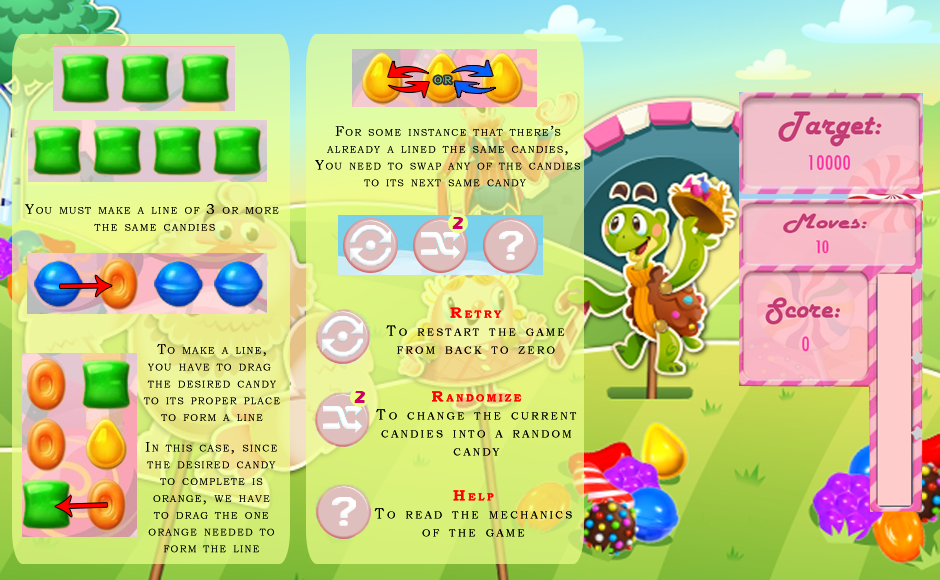
<style>
.page{position:relative;width:940px;height:580px}
.page>*{position:absolute;margin:0}
.t1{font:10px "BookmanOldStyle";letter-spacing:0.2em;color:#86e994;text-transform:uppercase}
.t2{font:14px "BookmanOldStyle";letter-spacing:0.1em;color:#000000;font-variant:small-caps}
.t3{font:15px "BookmanOldStyle";letter-spacing:0.2em;color:#000000;font-variant:small-caps}
.t4{font:15px "BookmanOldStyle-Bold";letter-spacing:0.2em;color:#ff0000;font-variant:small-caps}
</style>
<div class="page">
<p class="t1" style="left:434px;top:76px;width:18px;height:8px">or</p>
<p class="t2" style="left:315px;top:125px;width:265px;height:62px;text-align:center">For some instance that there’s<br>already a lined the same candies,<br>You need to swap any of the candies<br>to its next same candy</p>
<p class="t2" style="left:315px;top:125px;width:265px;height:62px;text-align:center">For some instance that there’s<br>already a lined the same candies,<br>You need to swap any of the candies<br>to its next same candy</p>
<p class="t2" style="left:25px;top:204px;width:254px;height:27px;text-align:center">You must make a line of 3 or more <br>the same candies</p>
<p class="t2" style="left:25px;top:204px;width:254px;height:27px;text-align:center">You must make a line of 3 or more <br>the same candies</p>
<p class="t3" style="left:386px;top:307px;width:179px;height:47px;text-align:center"><span class="t4">Retry<br></span>To restart the game<br>from back to zero</p>
<p class="t3" style="left:386px;top:307px;width:179px;height:47px;text-align:center"><span class="t4">Retry<br></span>To restart the game<br>from back to zero</p>
<p class="t2" style="left:143px;top:344px;width:137px;height:77px;text-align:center">To make a line,<br>you have to drag <br>the desired candy<br>to its proper place<br>to form a line</p>
<p class="t2" style="left:143px;top:344px;width:137px;height:77px;text-align:center">To make a line,<br>you have to drag <br>the desired candy<br>to its proper place<br>to form a line</p>
<p class="t3" style="left:376px;top:391px;width:201px;height:65px;text-align:center"><span class="t4">Randomize<br></span>To change the current<br>candies into a random<br>candy</p>
<p class="t3" style="left:376px;top:391px;width:201px;height:65px;text-align:center"><span class="t4">Randomize<br></span>To change the current<br>candies into a random<br>candy</p>
<p class="t2" style="left:145px;top:442px;width:132px;height:111px;text-align:center">In this case, since<br>the desired candy<br>to complete is<br>orange, we have<br>to drag the one<br>orange needed to<br>form the line</p>
<p class="t2" style="left:145px;top:442px;width:132px;height:111px;text-align:center">In this case, since<br>the desired candy<br>to complete is<br>orange, we have<br>to drag the one<br>orange needed to<br>form the line</p>
<p class="t3" style="left:374px;top:490px;width:198px;height:47px;text-align:center"><span class="t4">Help<br></span>To read the mechanics<br>of the game</p>
<p class="t3" style="left:374px;top:490px;width:198px;height:47px;text-align:center"><span class="t4">Help<br></span>To read the mechanics<br>of the game</p>
</div>
